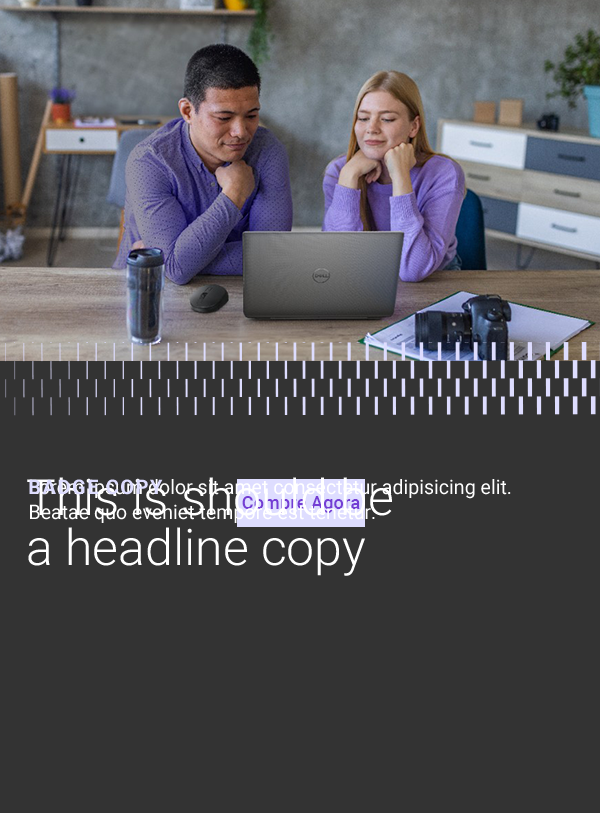
<style>
.page{position:relative;width:600px;height:813px;background:#333333}
.page>*{position:absolute;margin:0}
.t1{font:50px/50px "Roboto-Light";color:#ffffff}
.t2{font:20px "Roboto-Bold";letter-spacing:0.04em;color:#deddff;text-transform:uppercase}
.t3{font:20px/25px "Roboto-Regular";color:#ffffff}
.t4{font:18px "Roboto-Medium";color:#743dd4}
</style>
<div class="page">
<p class="t1" style="left:27px;top:477px;width:365px;height:99px">This is should be<br>a headline copy</p>
<p class="t2" style="left:29px;top:479px;width:134px;height:16px">BADGE COPY</p>
<p class="t3" style="left:30px;top:479px;width:481px;height:44px">Lorem ipsum dolor sit amet consectetur adipisicing elit.<br>Beatae quo eveniet tempore est tenetur.</p>
<p class="t4" style="left:242px;top:496px;width:118px;height:17px">Compre Agora</p>
</div>
